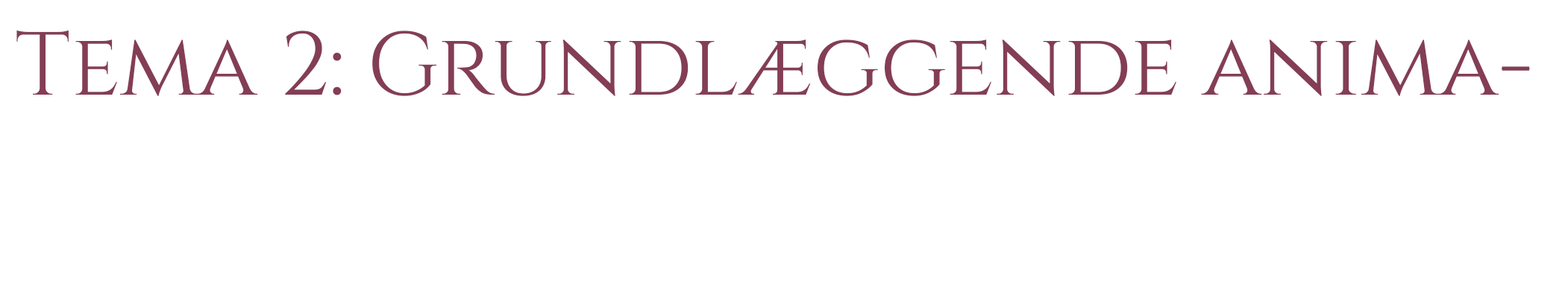
<style>
.page{position:relative;width:1568px;height:307px;background:#ffffff}
.page>*{position:absolute;margin:0}
.t1{font:89.5px "Cinzel-Regular";color:#843d56}
</style>
<div class="page">
<p class="t1" style="left:16px;top:30px;width:1514px;height:66px">Tema 2: Grundlæggende animation</p>
</div>
